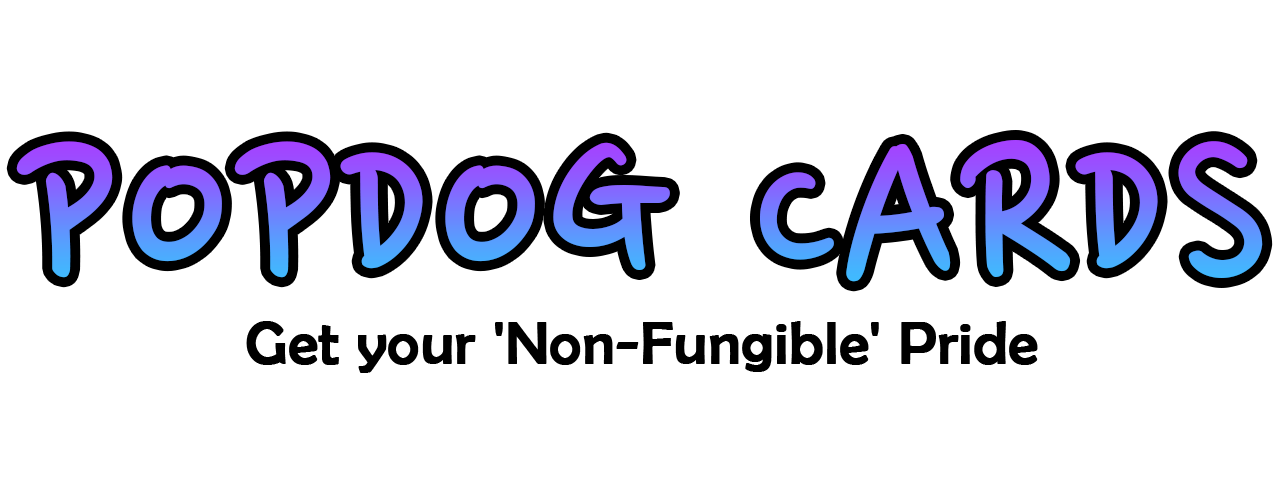
<style>
.page{position:relative;width:1279px;height:504px;background:#ffffff}
.page>*{position:absolute;margin:0}
.t1{font:243.1px "NanumPen";text-transform:uppercase;font-weight:bold}
.t2{font:60.1px "BerlinSansFB-Reg";color:#000000;font-weight:bold}
</style>
<div class="page">
<p class="t1" style="left:16px;top:140px;width:1247px;height:142px">PopDog Cards</p>
<p class="t2" style="left:246px;top:321px;width:792px;height:52px">Get your 'Non-Fungible' Pride</p>
</div>
